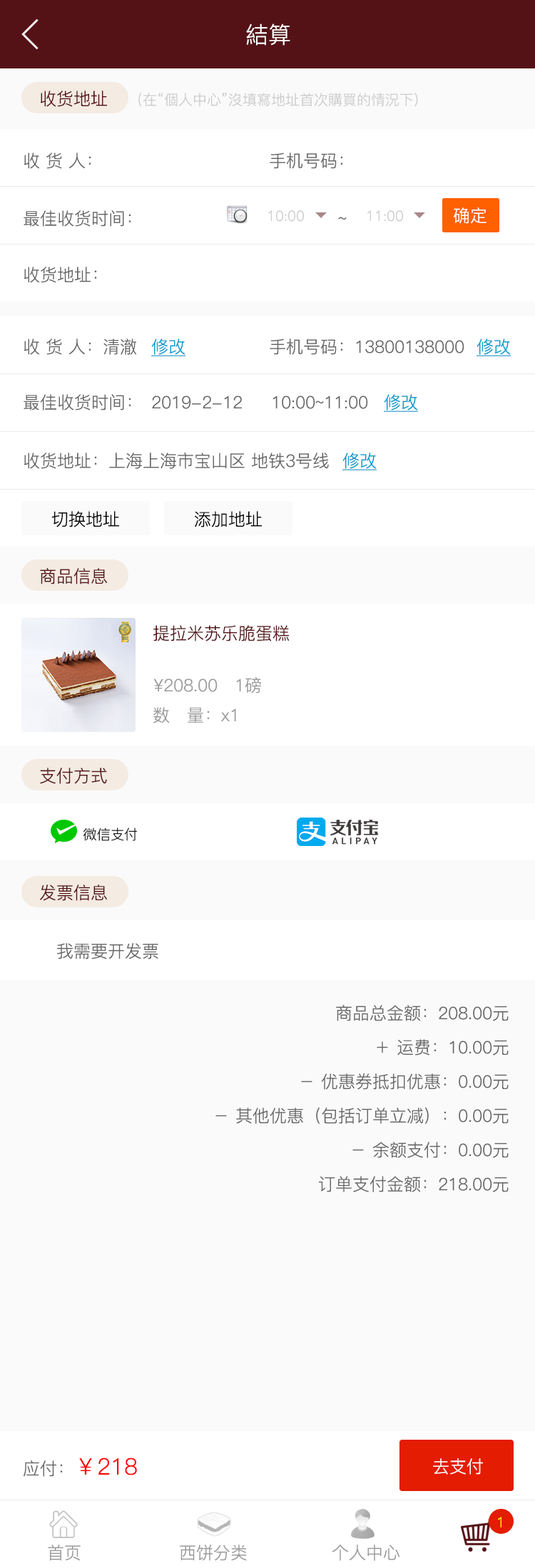
<style>
.page{position:relative;width:535px;height:1568px;background:#fafafa}
.page>*{position:absolute;margin:0}
.t1{font:22.8px "PingFang-SC-Regular";color:#ffffff}
.t2{font:17.1px "PingFang-SC-Regular";color:#541217}
.t3{font:14.3px "PingFang-SC-Regular";color:#cccccc}
.t4{font:17.1px "PingFang-SC-Regular";color:#666666}
.t5{font:17.1px "PingFang-SC-Regular";color:#ffffff}
.t6{font:17.1px "PingFang-SC-Regular";color:#0099cc;text-decoration:underline}
.t7{font:17.1px "PingFang-SC-Regular";color:#000000}
.t8{font:17.1px "PingFang-SC-Regular";color:#999999}
.t9{font:17.1px/17.1px "PingFang-SC-Regular";color:#666666}
.t10{font:22.8px "PingFang-SC-Regular";color:#ff0000}
.t11{font:14.3px "PingFang-SC-Regular";color:#ffff00}
</style>
<div class="page">
<p class="t1" style="left:246px;top:24px;width:44px;height:22px">結算</p>
<p class="t2" style="left:41px;top:91px;width:66px;height:16px">收货地址</p>
<p class="t3" style="left:138px;top:93px;width:280px;height:14px">(在“個人中心”沒填寫地址首次購買的情況下)</p>
<p class="t4" style="left:24px;top:153px;width:67px;height:16px">收 货 人：</p>
<p class="t4" style="left:269px;top:153px;width:74px;height:16px">手机号码：</p>
<p class="t5" style="left:453px;top:207px;width:33px;height:17px">确定</p>
<p class="t4" style="left:24px;top:210px;width:107px;height:17px">最佳收货时间：</p>
<p class="t3" style="left:268px;top:210px;width:36px;height:12px">10:00</p>
<p class="t4" style="left:338px;top:217px;width:8px;height:3px">~</p>
<p class="t3" style="left:367px;top:210px;width:36px;height:12px">11:00</p>
<p class="t4" style="left:24px;top:267px;width:73px;height:16px">收货地址：</p>
<p class="t4" style="left:24px;top:339px;width:113px;height:16px">收 货 人：清澈</p>
<p class="t6" style="left:151px;top:339px;width:35px;height:17px">修改</p>
<p class="t4" style="left:269px;top:339px;width:195px;height:16px">手机号码：13800138000</p>
<p class="t6" style="left:476px;top:339px;width:35px;height:17px">修改</p>
<p class="t4" style="left:24px;top:394px;width:344px;height:17px">最佳收货时间： 2019-2-12     10:00~11:00</p>
<p class="t6" style="left:383px;top:394px;width:35px;height:18px">修改</p>
<p class="t4" style="left:24px;top:453px;width:305px;height:16px">收货地址：上海上海市宝山区 地铁3号线</p>
<p class="t6" style="left:342px;top:453px;width:35px;height:17px">修改</p>
<p class="t7" style="left:51px;top:511px;width:68px;height:16px">切换地址</p>
<p class="t7" style="left:195px;top:511px;width:67px;height:16px">添加地址</p>
<p class="t2" style="left:40px;top:568px;width:67px;height:16px">商品信息</p>
<p class="t2" style="left:153px;top:625px;width:136px;height:16px">提拉米苏乐脆蛋糕</p>
<p class="t8" style="left:153px;top:677px;width:108px;height:16px">¥208.00   1磅</p>
<p class="t8" style="left:153px;top:707px;width:83px;height:16px">数   量：x1</p>
<p class="t2" style="left:40px;top:768px;width:67px;height:16px">支付方式</p>
<p class="t2" style="left:40px;top:884px;width:67px;height:17px">发票信息</p>
<p class="t4" style="left:57px;top:943px;width:101px;height:16px">我需要开发票</p>
<p class="t9" style="left:215px;top:1005px;width:293px;height:187px;text-align:right">商品总金额：208.00元<br><br>＋ 运费：10.00元<br><br>－ 优惠券抵扣优惠：0.00元<br><br>－ 其他优惠（包括订单立减）：0.00元<br><br>－ 余额支付：0.00元<br><br>订单支付金额：218.00元</p>
<p class="t10" style="left:24px;top:1458px;width:113px;height:19px"><span class="t4">应付：</span>￥218</p>
<p class="t5" style="left:433px;top:1458px;width:50px;height:17px">去支付</p>
<p class="t11" style="left:497px;top:1517px;width:4px;height:10px">1</p>
<p class="t8" style="left:48px;top:1544px;width:33px;height:17px">首页</p>
<p class="t8" style="left:180px;top:1544px;width:67px;height:17px">西饼分类</p>
<p class="t8" style="left:331px;top:1544px;width:69px;height:17px">个人中心</p>
</div>
